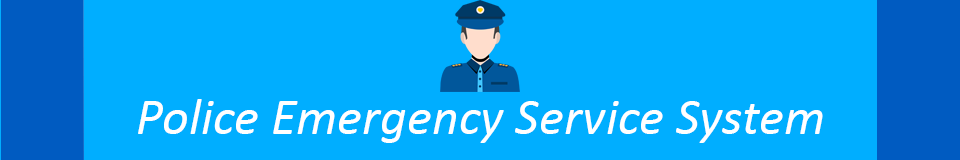
<style>
.page{position:relative;width:960px;height:160px;background:#00aeff}
.page>*{position:absolute;margin:0}
.t1{font:52.2px "Calibri-Italic";color:#ffffff}
</style>
<div class="page">
<p class="t1" style="left:138px;top:99px;width:685px;height:44px">Police Emergency Service System</p>
</div>
